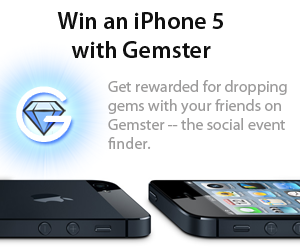
<style>
.page{position:relative;width:300px;height:250px;background:#ffffff}
.page>*{position:absolute;margin:0}
.t1{font:24px "MyriadPro-Semibold";color:#101010}
.t2{font:72px "BelleroseLight";color:#ffffff}
.t3{font:16px "MyriadPro-Regular";color:#9c9b9b}
</style>
<div class="page">
<p class="t1" style="left:57px;top:12px;width:166px;height:46px;text-align:center">Win an iPhone 5<br>with Gemster</p>
<p class="t2" style="left:17px;top:87px;width:54px;height:54px">G</p>
<p class="t3" style="left:108px;top:80px;width:179px;height:69px">Get rewarded for dropping<br>gems with your friends on<br>Gemster -- the social event <br>finder.</p>
</div>
